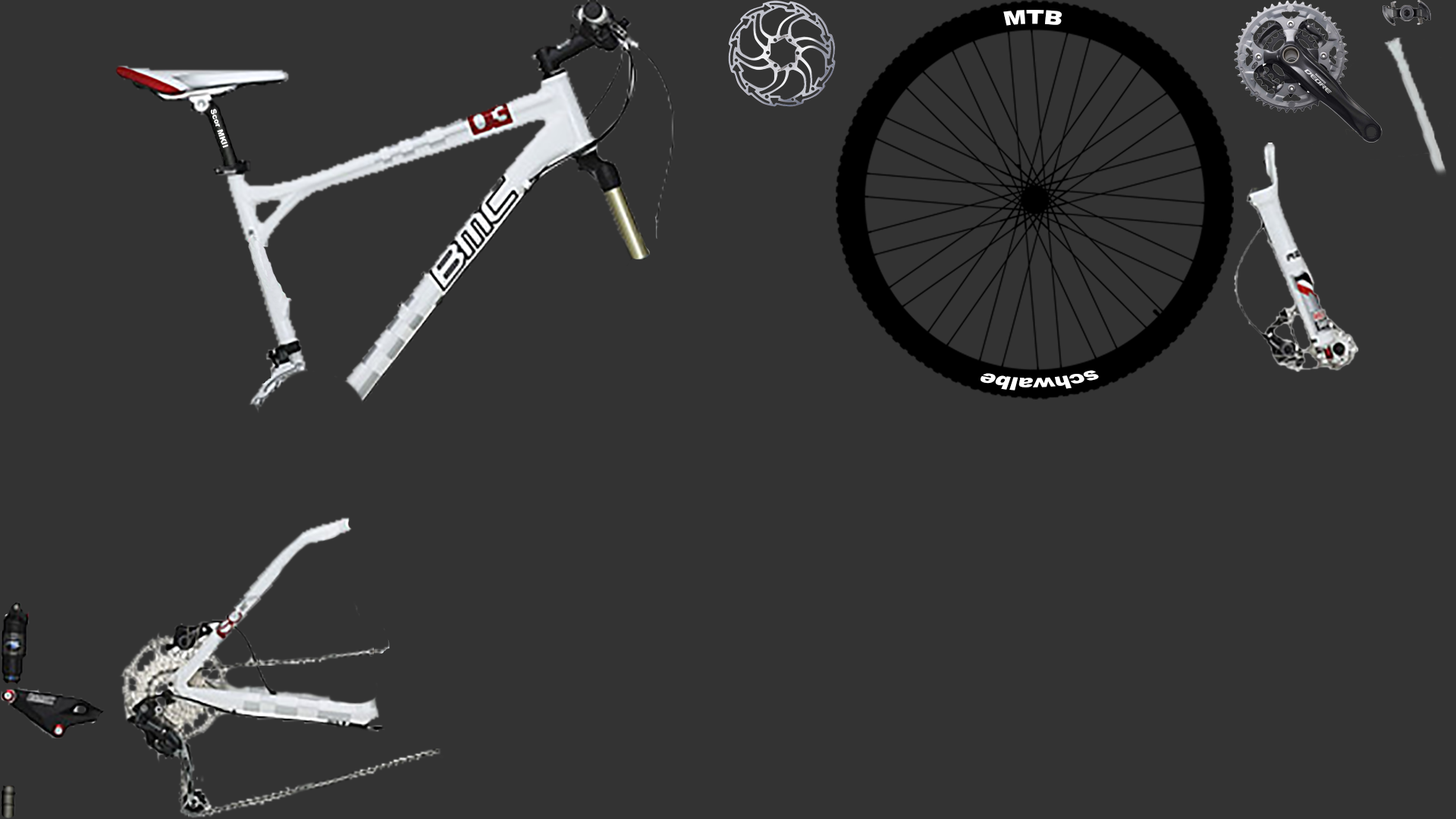
<style>
.page{position:relative;width:1456px;height:819px;background:#333333}
.page>*{position:absolute;margin:0}
.t1{font:19.1px "Arial-Black";color:#ffffff;scale:1.17 1}
.t2{font:7.6px "Arial-Black";color:#ffffff}
.t3{font:16.9px "Arial-Black";color:#ffffff;scale:1.25 1}
</style>
<div class="page">
<p class="t1" style="left:1003px;top:10px;width:59px;height:16px">MTB</p>
<p class="t2" style="left:210px;top:108px;width:18px;height:40px;rotate:71deg">Scor MKII</p>
<p class="t3" style="left:981px;top:370px;width:118px;height:21px;rotate:178deg">schwalbe</p>
</div>
